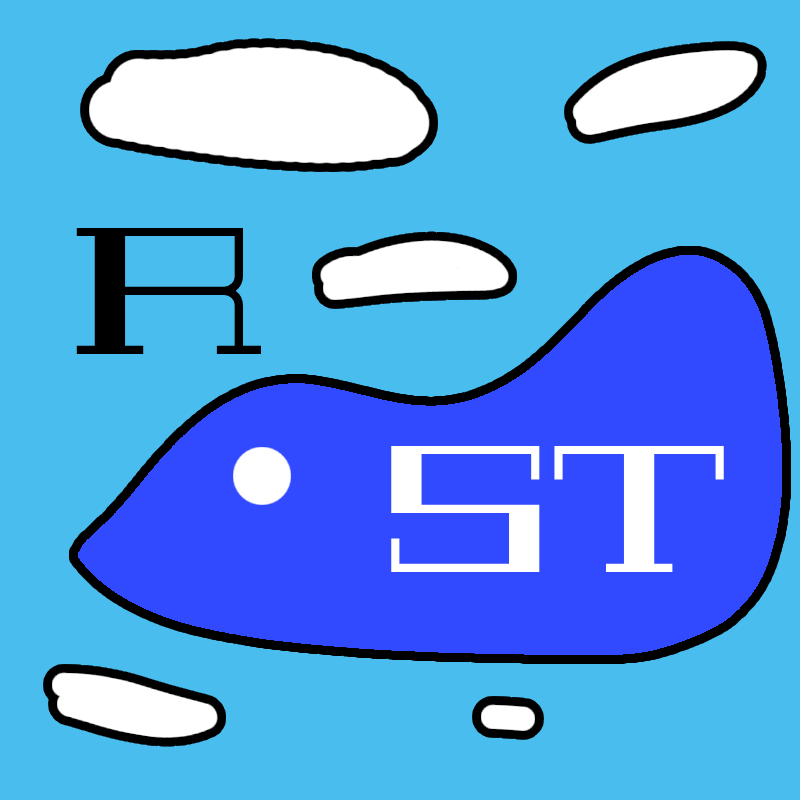
<style>
.page{position:relative;width:800px;height:800px;background:#49bdee}
.page>*{position:absolute;margin:0}
.t1{font:181.5px "GeostarFill-Regular";color:#ffffff}
.t2{font:181.5px "GeostarFill-Regular";color:#000000}
</style>
<div class="page">
<p class="t1" style="left:76px;top:227px;width:648px;height:346px"><span class="t2">R  <br>       </span>ST</p>
</div>
